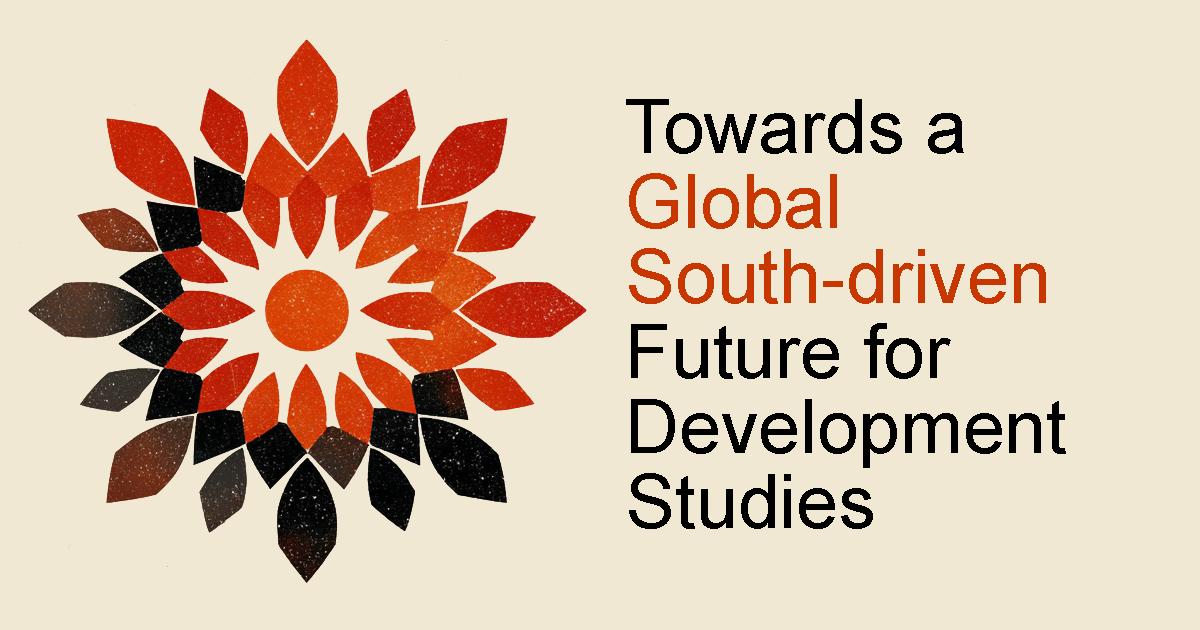
<style>
.page{position:relative;width:1200px;height:630px;background:#f1e8d4}
.page>*{position:absolute;margin:0}
.t1{font:75px/75px "ArialMT";color:#000000}
.t2{font:75px/75px "ArialMT";color:#c93701}
</style>
<div class="page">
<p class="t1" style="left:626px;top:99px;width:440px;height:430px">Towards a <span class="t2">Global South-driven<br></span>Future for Development Studies</p>
</div>
